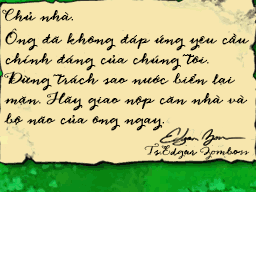
<style>
.page{position:relative;width:256px;height:256px;background:#f7e6ad}
.page>*{position:absolute;margin:0}
.t1{font:12px "HLTAnnaClara";color:#000000;font-weight:bold}
.t2{font:12px/20px "HLTAnnaClara";color:#000000;font-weight:bold}
.t3{font:9px/20px "HLTAnnaClara";color:#000000;font-weight:bold}
</style>
<div class="page">
<p class="t1" style="left:2px;top:8px;width:71px;height:14px">Chủ nhà.</p>
<p class="t2" style="left:4px;top:28px;width:245px;height:103px">Ông đã không đáp ứng yêu cầu<br>chính đáng của chúng tôi.<br>Đừng trách sao nước biển lại<br>mặn. Hãy giao nộp căn nhà và<br>bộ não của ông ngay.</p>
<p class="t3" style="left:144px;top:143px;width:106px;height:17px">Ts.Edgar Zomboss</p>
</div>
